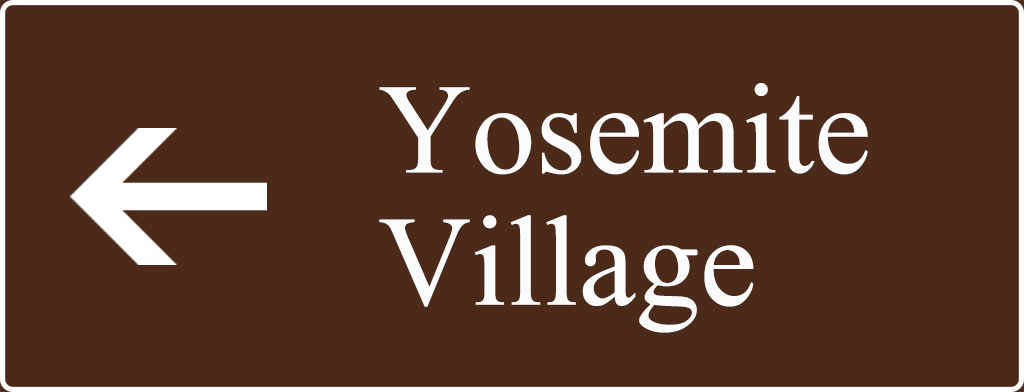
<style>
.page{position:relative;width:1024px;height:392px;background:#4c2a19}
.page>*{position:absolute;margin:0}
.t1{font:128.6px/132.2px "IskoolaPota";color:#fbfbfb}
</style>
<div class="page">
<p class="t1" style="left:379px;top:83px;width:489px;height:250px">Yosemite <br>Village</p>
</div>
